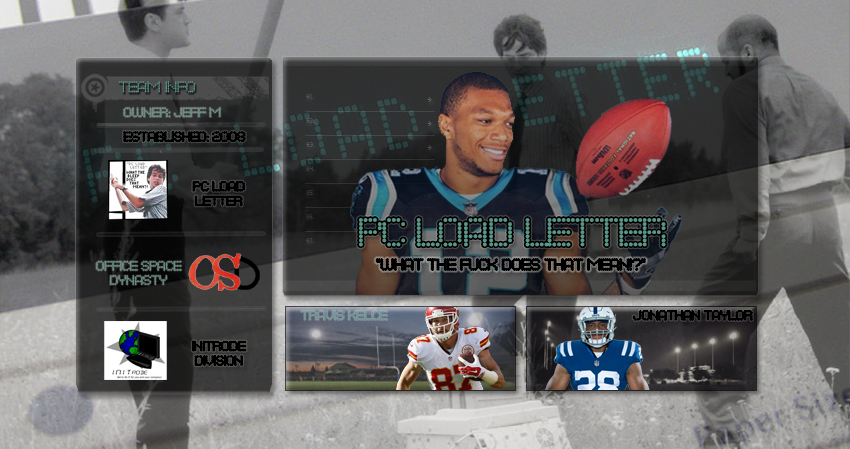
<style>
.page{position:relative;width:850px;height:449px}
.page>*{position:absolute;margin:0}
.t1{font:14px "DotsAllForNowJL";letter-spacing:-0.075em;color:#5b9587}
.t2{font:12px "DotsAllForNowJL";letter-spacing:-0.075em;color:#5b9587}
.t3{font:12px "DotsAllForNowJL";letter-spacing:-0.075em;color:#000000}
.t4{font:36px "DotsAllForNowJL";letter-spacing:-0.075em;color:#5b9587}
.t5{font:14px "DotsAllForNowJL";letter-spacing:-0.075em;color:#000000}
</style>
<div class="page">
<p class="t1" style="left:119px;top:81px;width:76px;height:12px">TEAM INFO</p>
<p class="t2" style="left:123px;top:107px;width:98px;height:10px">Owner: Jeff M</p>
<p class="t3" style="left:124px;top:131px;width:121px;height:11px">Established: 2008</p>
<p class="t3" style="left:193px;top:181px;width:52px;height:25px;text-align:center">PC Load<br>Letter</p>
<p class="t4" style="left:359px;top:218px;width:307px;height:29px">PC LOAD LETTER</p>
<p class="t2" style="left:96px;top:261px;width:86px;height:24px;text-align:center">Office Space<br>Dynasty</p>
<p class="t5" style="left:376px;top:259px;width:269px;height:12px">”WHAT THE FUCK DOES THAT MEAN!?”</p>
<p class="t2" style="left:301px;top:310px;width:87px;height:10px">TRAVIS KELCE</p>
<p class="t3" style="left:633px;top:310px;width:119px;height:10px">Jonathan Taylor</p>
<p class="t3" style="left:192px;top:341px;width:54px;height:25px;text-align:center">Initrode<br>Division</p>
</div>
